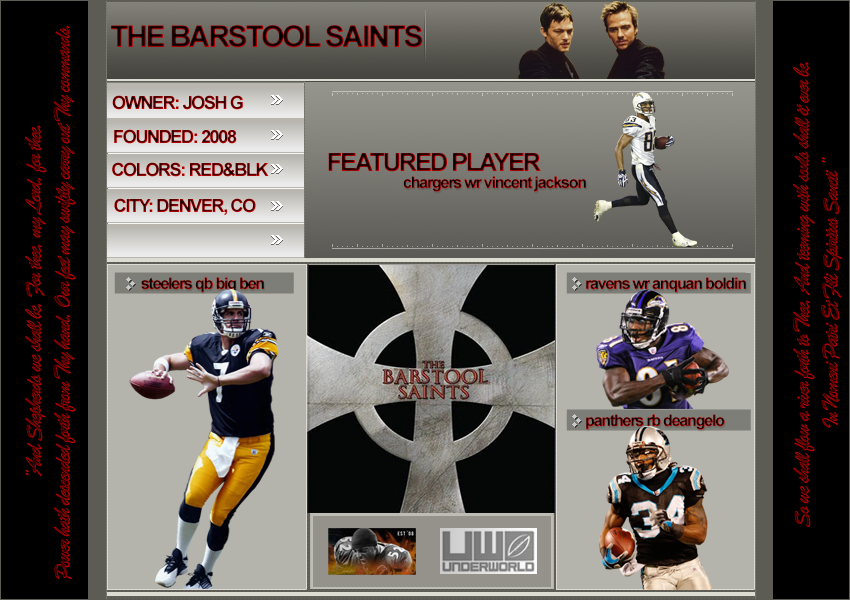
<style>
.page{position:relative;width:850px;height:600px}
.page>*{position:absolute;margin:0}
.t1{font:24px "BrushScriptMT";letter-spacing:-0.075em}
.t2{font:30px "Arial-BoldMT";letter-spacing:-0.075em}
.t3{font:18px "Arial-BoldMT";letter-spacing:-0.075em}
.t4{font:25px "Arial-BoldMT";letter-spacing:-0.075em}
.t5{font:16px "Arial-BoldMT";letter-spacing:-0.075em}
</style>
<div class="page">
<p class="t1" style="left:25px;top:25px;width:51px;height:555px;text-align:center;rotate:-90deg">“And Shepherds we shall be, For thee, my Lord, for thee.<br>Power hath descended forth from Thy hand, Our feet may swiftly carry out Thy commands.</p>
<p class="t2" style="left:111px;top:25px;width:312px;height:23px">THE BARSTOOL SAINTS</p>
<p class="t1" style="left:793px;top:62px;width:50px;height:465px;text-align:center;rotate:-90deg">So we shall flow a river forth to Thee, And teeming with souls shall it ever be.<br>In Nomeni Patri Et Fili Spiritus Sancti ”</p>
<p class="t3" style="left:112px;top:95px;width:131px;height:15px">OWNER: JOSH G</p>
<p class="t3" style="left:114px;top:129px;width:123px;height:15px">FOUNDED: 2008</p>
<p class="t4" style="left:328px;top:153px;width:213px;height:19px">FEATURED PLAYER</p>
<p class="t3" style="left:112px;top:162px;width:157px;height:15px">COLORS: RED&amp;BLK</p>
<p class="t5" style="left:403px;top:176px;width:183px;height:16px">chargers wr vincent jackson</p>
<p class="t3" style="left:114px;top:198px;width:142px;height:17px">CITY: DENVER, CO</p>
<p class="t5" style="left:141px;top:277px;width:123px;height:16px">steelers qb big ben</p>
<p class="t5" style="left:586px;top:277px;width:160px;height:16px">ravens wr anquan boldin</p>
<p class="t5" style="left:586px;top:414px;width:139px;height:16px">panthers rb deangelo</p>
</div>
